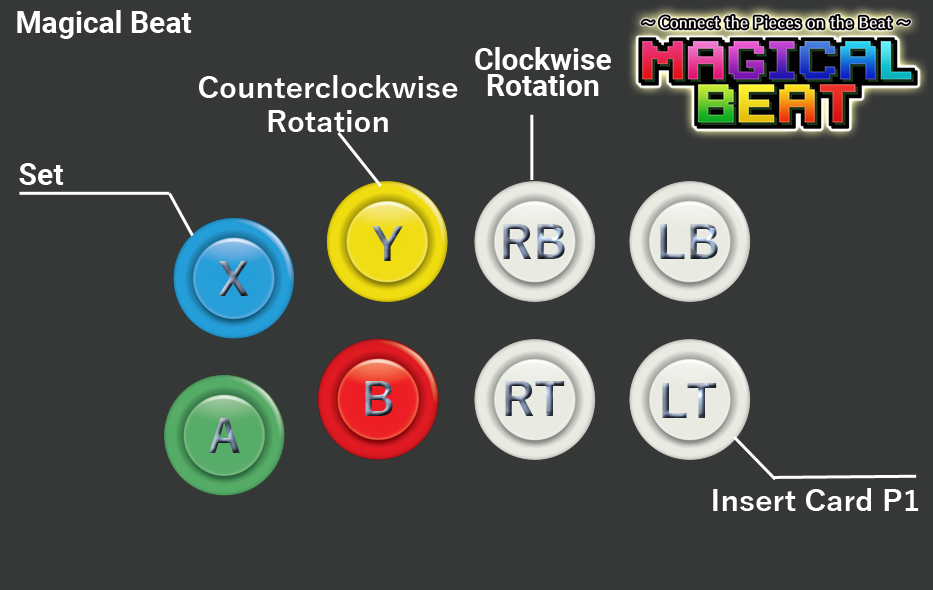
<style>
.page{position:relative;width:933px;height:590px;background:#363838}
.page>*{position:absolute;margin:0}
.t1{font:30px "Roboto-Bold";color:#ffffff}
.t2{font:30px/26px "Roboto-Bold";color:#ffffff}
.t3{font:30px/34px "YuGothic-Bold";color:#ffffff}
.t4{font:30px "YuGothic-Bold";color:#ffffff}
</style>
<div class="page">
<p class="t1" style="left:17px;top:10px;width:175px;height:29px">Magical Beat</p>
<p class="t2" style="left:475px;top:47px;width:136px;height:49px;text-align:center">Clockwise<br>Rotation</p>
<p class="t3" style="left:199px;top:75px;width:259px;height:57px;text-align:center">Counterclockwise<br>Rotation</p>
<p class="t1" style="left:19px;top:163px;width:45px;height:22px">Set</p>
<p class="t4" style="left:713px;top:488px;width:206px;height:23px">Insert Card P1</p>
</div>
